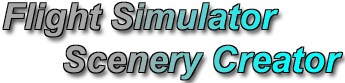
<style>
.page{position:relative;width:345px;height:83px;background:#ffffff}
.page>*{position:absolute;margin:0}
.t1{font:35.9px "Arial-BoldItalicMT"}
</style>
<div class="page">
<p class="t1" style="left:3px;top:2px;width:340px;height:78px">Flight Simulator<br>      Scenery Creator</p>
</div>
